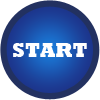
<style>
.page{position:relative;width:100px;height:100px;background:#ffffff}
.page>*{position:absolute;margin:0}
.t1{font:20.1px "Rockwell-ExtraBold";color:#ffffff}
</style>
<div class="page">
<p class="t1" style="left:13px;top:43px;width:74px;height:14px">START</p>
</div>
